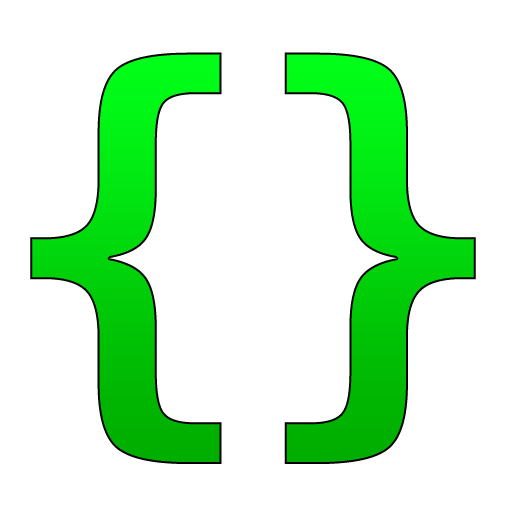
<style>
.page{position:relative;width:512px;height:512px;background:#ffffff}
.page>*{position:absolute;margin:0}
.t1{font:445.6px "MesloLGS-Bold";letter-spacing:0.025em}
</style>
<div class="page">
<p class="t1" style="left:30px;top:52px;width:446px;height:412px">{}</p>
</div>
